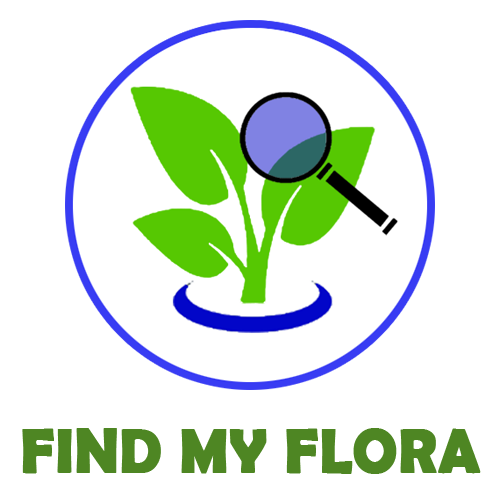
<style>
.page{position:relative;width:500px;height:500px;background:#ffffff}
.page>*{position:absolute;margin:0}
.t1{font:63.2px "BerlinSansFBDemi-Bold";color:#4e8623;font-weight:bold;scale:0.93 1}
</style>
<div class="page">
<p class="t1" style="left:22px;top:428px;width:459px;height:46px">FIND MY FLORA</p>
</div>
